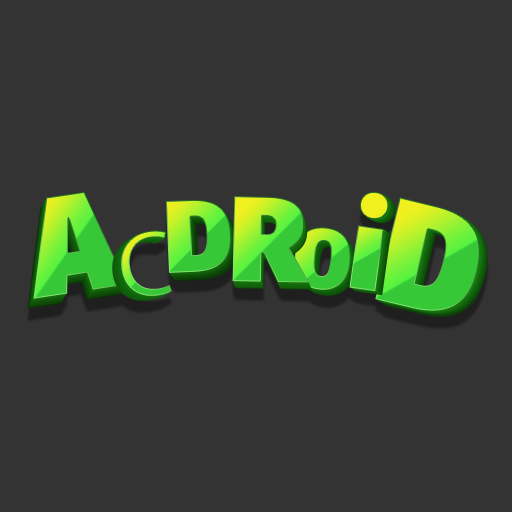
<style>
.page{position:relative;width:512px;height:512px;background:#333333}
.page>*{position:absolute;margin:0}
.t1{font:140.3px "FiraSans-Ultra"}
.t2{font:121.6px "FiraSans-Ultra"}
.t3{font:116.9px "FiraSans-Ultra"}
.t4{font:149.7px "FiraSans-Ultra"}
.t5{font:102.9px "FiraSans-Ultra"}
.t6{font:93.5px "MyriadPro-Regular"}
.t7{font:84.2px "FiraSans-Ultra"}
</style>
<div class="page">
<p class="t1" style="left:33px;top:191px;width:94px;height:108px;rotate:-9deg">A</p>
<p class="t2" style="left:232px;top:196px;width:77px;height:87px;rotate:1deg">R</p>
<p class="t3" style="left:349px;top:191px;width:40px;height:101px;rotate:8deg">i</p>
<p class="t4" style="left:375px;top:197px;width:105px;height:114px;rotate:14deg">D</p>
<p class="t5" style="left:165px;top:199px;width:66px;height:74px;rotate:-3deg">D</p>
<p class="t6" style="left:121px;top:230px;width:51px;height:66px;rotate:-5deg">C</p>
<p class="t7" style="left:294px;top:227px;width:57px;height:63px;rotate:5deg">O</p>
</div>
